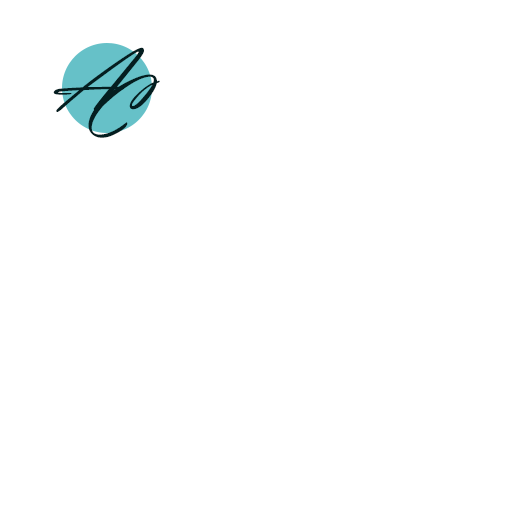
<style>
.page{position:relative;width:520px;height:520px;background:#ffffff}
.page>*{position:absolute;margin:0}
.t1{font:90px "VladimirScript";color:#041e20}
</style>
<div class="page">
<p class="t1" style="left:53px;top:47px;width:91px;height:65px">A</p>
<p class="t1" style="left:88px;top:74px;width:72px;height:64px">C</p>
</div>
